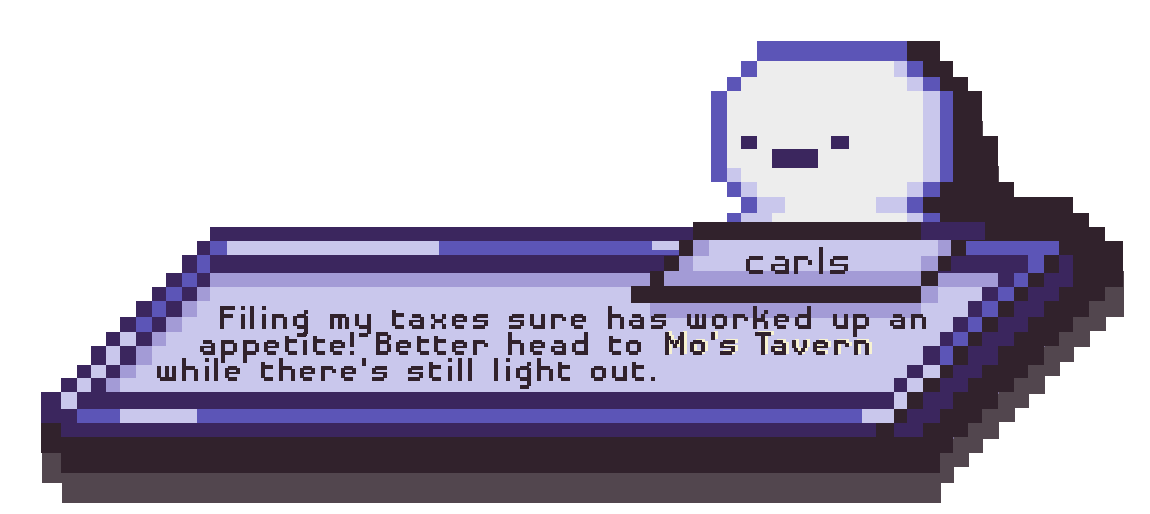
<style>
.page{position:relative;width:1150px;height:514px;background:#ffffff}
.page>*{position:absolute;margin:0}
.t1{font:50px "DisposableDroidBB";color:#31222c}
.t2{font:43.5px "DisposableDroidBB";color:#31222c}
</style>
<div class="page">
<p class="t1" style="left:746px;top:247px;width:102px;height:27px">carls</p>
<p class="t2" style="left:220px;top:306px;width:706px;height:31px">Filing my taxes sure has worked up an</p>
<p class="t2" style="left:200px;top:332px;width:441px;height:31px">appetite! Better head to</p>
<p class="t2" style="left:665px;top:332px;width:204px;height:23px">Mo’s Tavern</p>
<p class="t2" style="left:157px;top:358px;width:498px;height:31px">while there’s still light out.</p>
</div>
